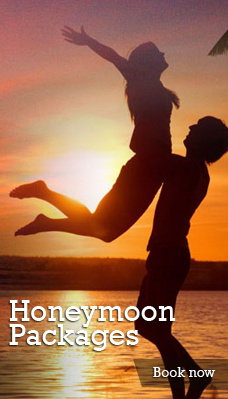
<style>
.page{position:relative;width:228px;height:399px}
.page>*{position:absolute;margin:0}
.t1{font:30px/24px "Rockwell";color:#fefefd}
.t2{font:14px "Rockwell";color:#fefefd}
</style>
<div class="page">
<p class="t1" style="left:9px;top:300px;width:167px;height:51px">Honeymoon<br>Packages</p>
<p class="t2" style="left:153px;top:367px;width:63px;height:10px">Book now</p>
</div>
